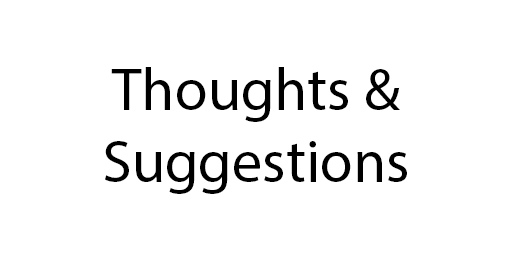
<style>
.page{position:relative;width:512px;height:256px;background:#ffffff}
.page>*{position:absolute;margin:0}
.t1{font:60px "MyriadPro-Regular";color:#000000}
</style>
<div class="page">
<p class="t1" style="left:105px;top:67px;width:302px;height:127px;text-align:center">Thoughts &amp;<br>Suggestions</p>
</div>
